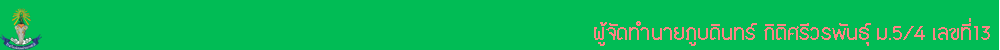
<style>
.page{position:relative;width:1000px;height:50px;background:#01bc55}
.page>*{position:absolute;margin:0}
.t1{font:25px "PK-Maehongson-Medium";color:#fc8484}
</style>
<div class="page">
<p class="t1" style="left:594px;top:18px;width:396px;height:28px">ผู้จัดทำนายภูบดินทร์ กิติศรีวรพันธุ์ ม.5/4 เลขที่13</p>
</div>
